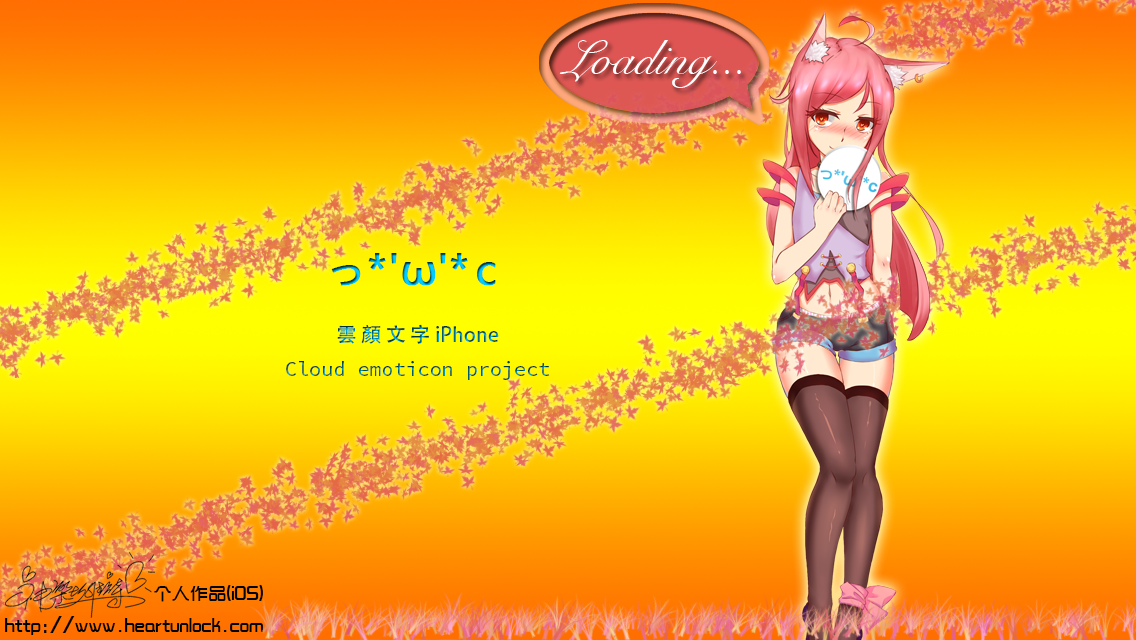
<style>
.page{position:relative;width:1136px;height:640px}
.page>*{position:absolute;margin:0}
.t1{font:48.5px "SnellRoundhand";color:#ffffff}
.t2{font:41.8px "MicrosoftYaHei";font-weight:bold}
.t3{font:20.1px "SourceCodePro-Regular"}
.t4{font:20.1px "AdobeHeitiStd-Regular"}
.t5{font:18.2px "TRENDS";color:#000000}
</style>
<div class="page">
<p class="t1" style="left:559px;top:40px;width:182px;height:48px">Loading...</p>
<p class="t2" style="left:331px;top:253px;width:165px;height:33px">っ*'ω'* c</p>
<p class="t3" style="left:286px;top:324px;width:264px;height:56px;text-align:center"><span class="t4">雲 顏 文 字 iPhone<br></span>Cloud emoticon project</p>
<p class="t5" style="left:5px;top:585px;width:258px;height:50px;text-align:right">个人作品(iOS)<br>http://www.heartunlock.com</p>
</div>
